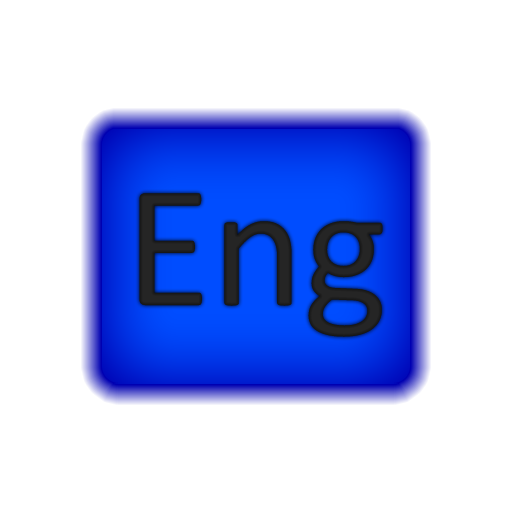
<style>
.page{position:relative;width:512px;height:512px;background:#ffffff}
.page>*{position:absolute;margin:0}
.t1{font:177px "Calibri";color:#252525}
</style>
<div class="page">
<p class="t1" style="left:139px;top:193px;width:244px;height:144px">Eng</p>
</div>
